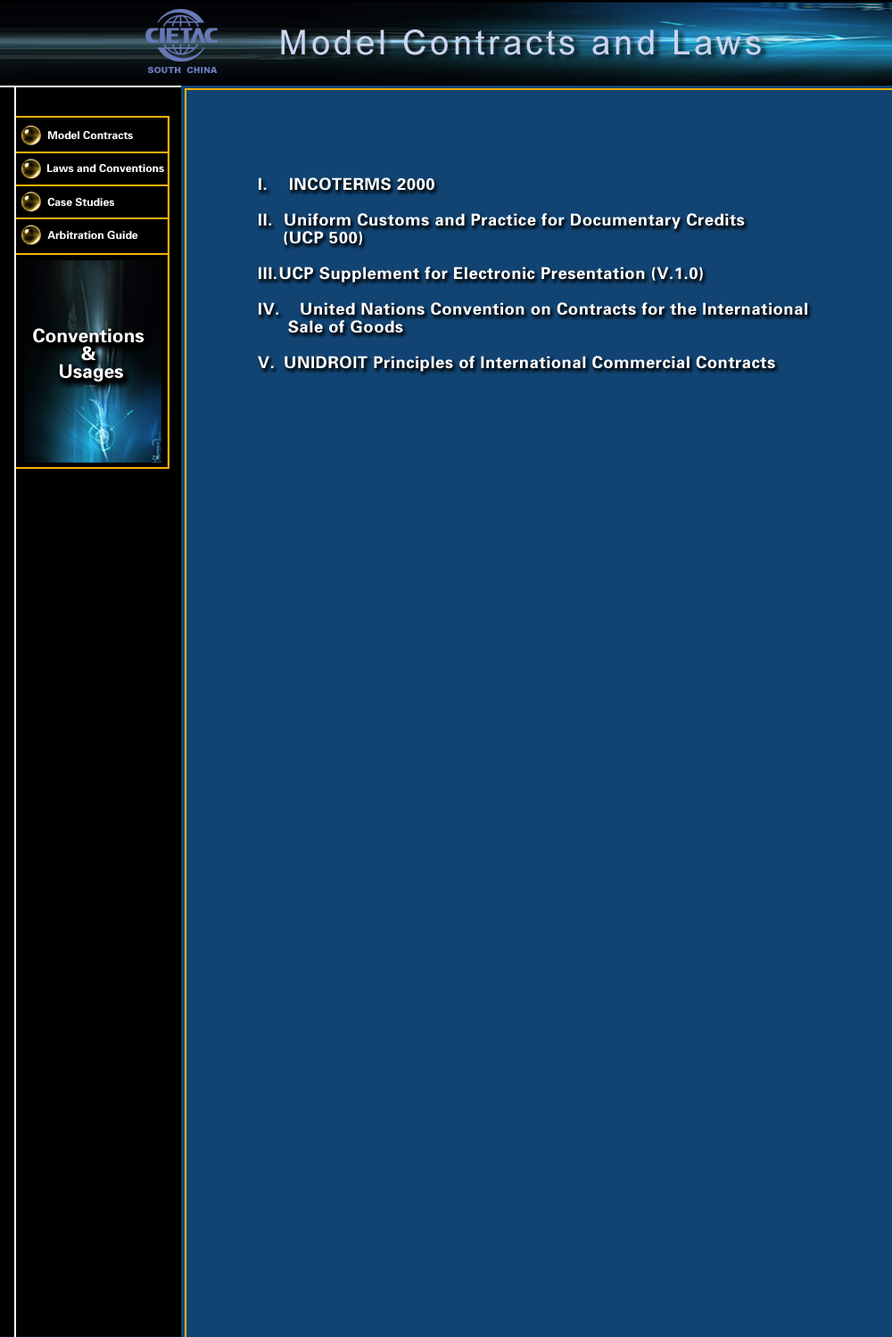
<style>
.page{position:relative;width:892px;height:1337px;background:#114473}
.page>*{position:absolute;margin:0}
.t1{font:10.9px "FZDHTJW--GB1-0";color:#ffffff}
.t2{font:16.6px/17.8px "FZDHTJW--GB1-0";letter-spacing:0.025em;color:#ffffff}
.t3{font:18.6px/17.9px "FZDHTJW--GB1-0";color:#ffffff}
</style>
<div class="page">
<p class="t1" style="left:48px;top:131px;width:85px;height:8px">Model Contracts</p>
<p class="t1" style="left:47px;top:164px;width:117px;height:8px">Laws and Conventions</p>
<p class="t2" style="left:258px;top:177px;width:549px;height:195px">I.   INCOTERMS 2000<br><br>II.  Uniform Customs and Practice for Documentary Credits<br>     (UCP 500)<br><br>III. UCP Supplement for Electronic Presentation (V.1.0)<br><br>IV. United Nations Convention on Contracts for the International<br>      Sale of Goods<br><br>V.  UNIDROIT Principles of International Commercial Contracts</p>
<p class="t1" style="left:47px;top:198px;width:67px;height:8px">Case Studies</p>
<p class="t1" style="left:47px;top:231px;width:91px;height:8px">Arbitration Guide</p>
<p class="t3" style="left:33px;top:328px;width:111px;height:54px;text-align:center">Conventions <br>&amp; <br>Usages</p>
</div>
